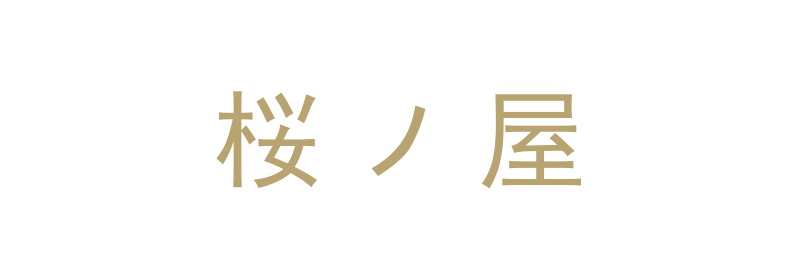
<style>
.page{position:relative;width:800px;height:280px;background:#ffffff}
.page>*{position:absolute;margin:0}
.t1{font:110px "SimHei";letter-spacing:0.2em;color:#b8a470}
</style>
<div class="page">
<p class="t1" style="left:216px;top:91px;width:365px;height:98px">桜ノ屋</p>
</div>
